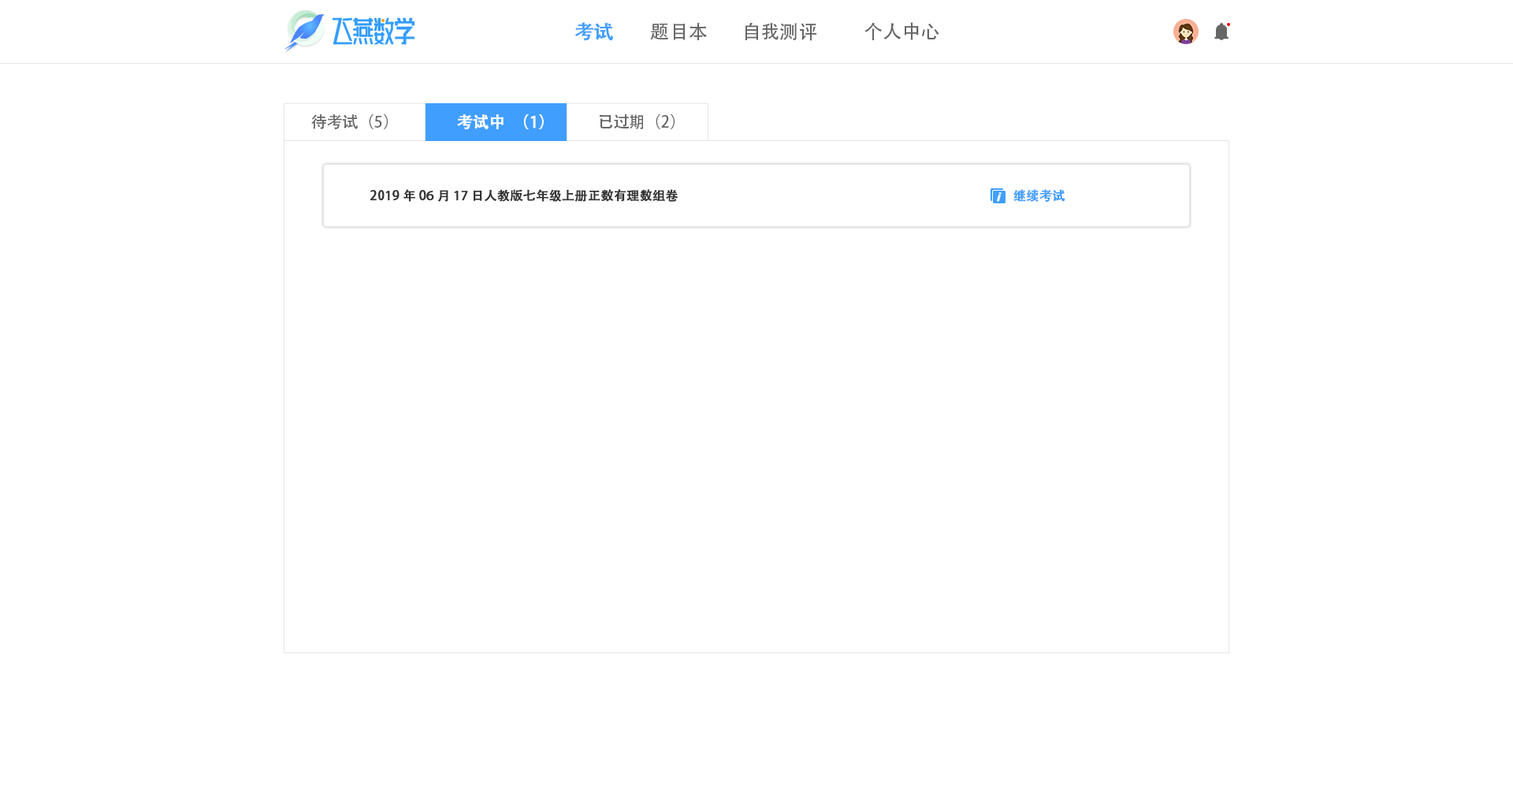
<style>
.page{position:relative;width:1513px;height:788px;background:#ffffff}
.page>*{position:absolute;margin:0}
.t1{font:18.9px "AdobeHeitiStd-Regular";color:#409eff;font-weight:bold}
.t2{font:18.9px "AdobeHeitiStd-Regular";color:#666666}
.t3{font:15.8px "AdobeHeitiStd-Regular";color:#666666}
.t4{font:15.8px "AdobeHeitiStd-Regular";color:#ffffff;font-weight:bold}
.t5{font:12.6px "AdobeHeitiStd-Regular";color:#333333;font-weight:bold}
.t6{font:12.6px "AdobeHeitiStd-Regular";color:#409eff;font-weight:bold}
</style>
<div class="page">
<p class="t1" style="left:575px;top:22px;width:38px;height:19px">考试</p>
<p class="t2" style="left:650px;top:23px;width:57px;height:17px">题目本</p>
<p class="t2" style="left:745px;top:22px;width:71px;height:19px">自我测评</p>
<p class="t2" style="left:865px;top:22px;width:74px;height:18px">个人中心</p>
<p class="t3" style="left:311px;top:114px;width:77px;height:15px">待考试（5）</p>
<p class="t4" style="left:457px;top:114px;width:87px;height:16px">考试中（1）</p>
<p class="t3" style="left:600px;top:114px;width:75px;height:15px">已过期（2）</p>
<p class="t5" style="left:370px;top:189px;width:309px;height:13px">2019年06月17日人教版七年级上册正数有理数组卷</p>
<p class="t6" style="left:1013px;top:189px;width:52px;height:14px">继续考试</p>
</div>
